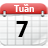
<style>
.page{position:relative;width:48px;height:48px}
.page>*{position:absolute;margin:0}
.t1{font:9.2px "SegoeUI-Bold";color:#ffffff}
.t2{font:22.9px "SegoeUI-Bold";color:#000000}
</style>
<div class="page">
<p class="t1" style="left:14px;top:4px;width:20px;height:8px">Tuần</p>
<p class="t2" style="left:16px;top:21px;width:12px;height:16px">7</p>
</div>
